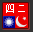
<style>
.page{position:relative;width:33px;height:32px;background:#f20000}
.page>*{position:absolute;margin:0}
.t1{font:10.4px "SimSun";color:#ffffff}
</style>
<div class="page">
<p class="t1" style="left:6px;top:4px;width:19px;height:9px">四二</p>
</div>
